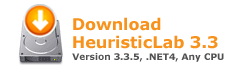
<style>
.page{position:relative;width:250px;height:70px;background:#ffffff}
.page>*{position:absolute;margin:0}
.t1{font:16px/18px "Verdana-Bold";color:#f7931d}
.t2{font:9px "Verdana-Bold";color:#515151}
</style>
<div class="page">
<p class="t1" style="left:73px;top:17px;width:145px;height:32px">Download<br>HeuristicLab 3.3</p>
<p class="t2" style="left:72px;top:53px;width:152px;height:9px">Version 3.3.5, .NET4, Any CPU</p>
</div>
